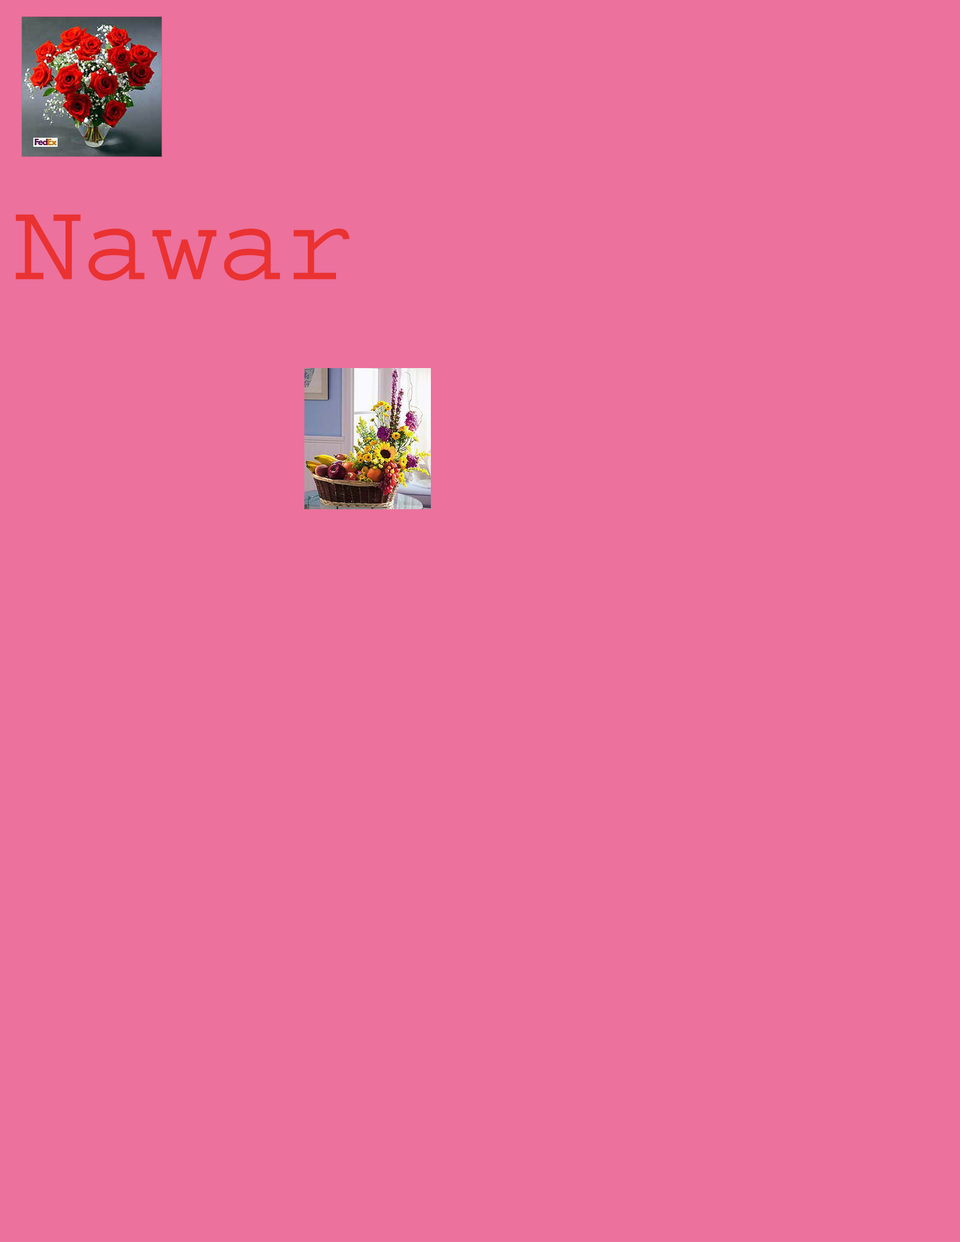
<style>
.page{position:relative;width:960px;height:1242px;background:#ec719c}
.page>*{position:absolute;margin:0}
.t1{font:112.9px "Courier";color:#ea3232}
</style>
<div class="page">
<p class="t1" style="left:16px;top:215px;width:334px;height:66px">Nawar</p>
</div>
